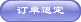
<style>
.page{position:relative;width:81px;height:22px}
.page>*{position:absolute;margin:0}
.t1{font:12px "LiSu";color:#fdf9f9}
</style>
<div class="page">
<p class="t1" style="left:17px;top:6px;width:48px;height:8px">订单退定</p>
</div>
